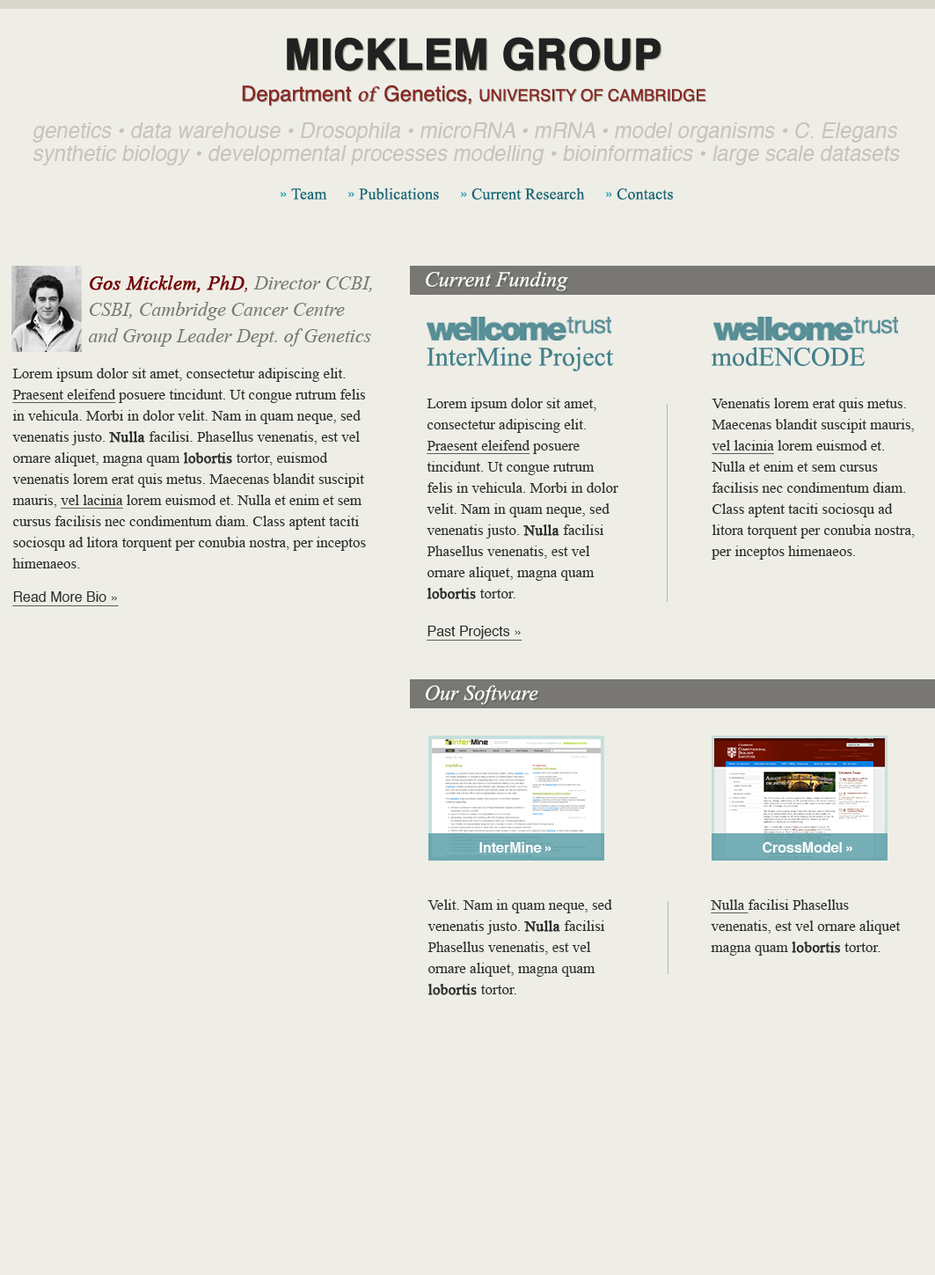
<style>
.page{position:relative;width:935px;height:1275px;background:#eeeee7}
.page>*{position:absolute;margin:0}
.t1{font:16.3px/31.7px "Helvetica";color:#882726}
.t2{font:42.2px/26.4px "Helvetica-Bold";color:#212121;font-weight:bold}
.t3{font:21.1px/31.7px "Helvetica";color:#882726}
.t4{font:21.1px/31.7px "TimesNewRomanPSMT";color:#882726;font-style:italic}
.t5{font:16.3px/31.7px "Helvetica"}
.t6{font:42.2px/26.4px "Helvetica-Bold";font-weight:bold}
.t7{font:21.1px/31.7px "Helvetica"}
.t8{font:21.1px/31.7px "TimesNewRomanPSMT";font-style:italic}
.t9{font:21.1px/22.7px "Helvetica";color:#c7c3bd;font-style:italic}
.t10{font:15.8px "TimesNewRomanPSMT";letter-spacing:0.01em;color:#196674}
.t11{font:14.1px "Helvetica";color:#33a6b2}
.t12{font:19.4px/26.4px "TimesNewRomanPS-ItalicMT";color:#787773}
.t13{font:19.4px/26.4px "TimesNewRomanPS-ItalicMT";color:#730505;font-weight:bold}
.t14{font:19.4px/26.4px "TimesNewRomanPS-ItalicMT";color:#730505}
.t15{font:21.1px "TimesNewRomanPS-ItalicMT";color:#ffffff}
.t16{font:26.4px "TimesNewRomanPSMT";color:#44818b}
.t17{font:15px/21.1px "TimesNewRomanPSMT";color:#2e2e2e}
.t18{font:15px/21.1px "TimesNewRomanPSMT";color:#2e2e2e;text-decoration:underline}
.t19{font:15px/21.1px "TimesNewRomanPSMT";color:#2e2e2e;font-weight:bold}
.t20{font:14.1px/12.3px "Helvetica";color:#2e2e2e;text-decoration:underline}
.t21{font:14.1px "Helvetica";color:#2e2e2e;text-decoration:underline}
.t22{font:14.1px "Helvetica-Bold";color:#ffffff}
</style>
<div class="page">
<p class="t1" style="left:242px;top:37px;width:464px;height:69px;text-align:center"><span class="t2">MICKLEM GROUP<br></span><span class="t3">Department </span><span class="t4">of  </span><span class="t3">Genetics, </span>UNIVERSITY OF CAMBRIDGE</p>
<p class="t5" style="left:243px;top:38px;width:464px;height:68px;text-align:center"><span class="t6">MICKLEM GROUP<br></span><span class="t7">Department </span><span class="t8">of  </span><span class="t7">Genetics, </span>UNIVERSITY OF CAMBRIDGE</p>
<p class="t9" style="left:33px;top:122px;width:867px;height:43px">genetics • data warehouse • Drosophila • microRNA • mRNA • model organisms • C. Elegans<br>synthetic biology • developmental processes modelling • bioinformatics • large scale datasets</p>
<p class="t10" style="left:281px;top:187px;width:392px;height:13px"><span class="t11">» </span>Team     <span class="t11">» </span>Publications     <span class="t11">» </span>Current Research     <span class="t11">» </span>Contacts</p>
<p class="t12" style="left:88px;top:275px;width:284px;height:72px"><span class="t13">Gos Micklem, PhD</span><span class="t14">, </span>Director CCBI,<br>CSBI, Cambridge Cancer Centre<br>and Group Leader Dept. of Genetics</p>
<p class="t15" style="left:426px;top:271px;width:142px;height:20px">Current Funding</p>
<p class="t16" style="left:427px;top:347px;width:187px;height:24px">InterMine Project</p>
<p class="t16" style="left:711px;top:347px;width:155px;height:19px">modENCODE</p>
<p class="t17" style="left:12px;top:368px;width:354px;height:238px">Lorem ipsum dolor sit amet, consectetur adipiscing elit.<br><span class="t18">Praesent eleifend</span> posuere tincidunt. Ut congue rutrum felis<br>in vehicula. Morbi in dolor velit. Nam in quam neque, sed<br>venenatis justo. <span class="t19">Nulla </span>facilisi. Phasellus venenatis, est vel<br>ornare aliquet, magna quam <span class="t19">lobortis </span>tortor, euismod<br>venenatis lorem erat quis metus. Maecenas blandit suscipit<br>mauris, <span class="t18">vel lacinia</span> lorem euismod et. Nulla et enim et sem<br>cursus facilisis nec condimentum diam. Class aptent taciti<br>sociosqu ad litora torquent per conubia nostra, per inceptos<br>himenaeos.<br><br><span class="t20">Read More Bio »</span></p>
<p class="t17" style="left:427px;top:398px;width:192px;height:201px">Lorem ipsum dolor sit amet,<br>consectetur adipiscing elit.<br><span class="t18">Praesent eleifend</span> posuere<br>tincidunt. Ut congue rutrum<br>felis in vehicula. Morbi in dolor<br>velit. Nam in quam neque, sed<br>venenatis justo. <span class="t19">Nulla </span>facilisi<br>Phasellus venenatis, est vel<br>ornare aliquet, magna quam<br><span class="t19">lobortis </span>tortor.</p>
<p class="t17" style="left:712px;top:398px;width:203px;height:162px">Venenatis lorem erat quis metus.<br>Maecenas blandit suscipit mauris,<br><span class="t18">vel lacinia</span> lorem euismod et.<br>Nulla et enim et sem cursus<br>facilisis nec condimentum diam.<br>Class aptent taciti sociosqu ad<br>litora torquent per conubia nostra,<br>per inceptos himenaeos.</p>
<p class="t21" style="left:427px;top:626px;width:96px;height:15px">Past Projects »</p>
<p class="t15" style="left:426px;top:685px;width:112px;height:20px">Our Software</p>
<p class="t22" style="left:480px;top:842px;width:72px;height:11px">InterMine »</p>
<p class="t22" style="left:763px;top:842px;width:90px;height:11px">CrossModel »</p>
<p class="t17" style="left:428px;top:899px;width:184px;height:96px">Velit. Nam in quam neque, sed<br>venenatis justo. <span class="t19">Nulla </span>facilisi<br>Phasellus venenatis, est vel<br>ornare aliquet, magna quam<br><span class="t19">lobortis </span>tortor.</p>
<p class="t17" style="left:711px;top:899px;width:190px;height:57px"><span class="t18">Nulla </span>facilisi Phasellus<br>venenatis, est vel ornare aliquet<br>magna quam <span class="t19">lobortis </span>tortor.</p>
</div>
